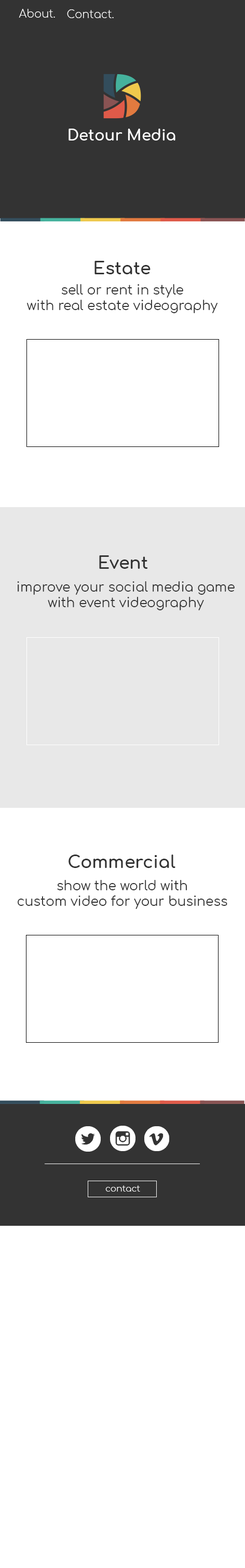
<style>
.page{position:relative;width:245px;height:1568px;background:#ffffff}
.page>*{position:absolute;margin:0}
.t1{font:10.8px "Comfortaa-Light";color:#ffffff}
.t2{font:15.1px "Comfortaa-Bold";color:#ffffff}
.t3{font:17.3px "Comfortaa-Bold";color:#333333}
.t4{font:13px "Comfortaa-Regular";color:#333333}
.t5{font:8.6px "Comfortaa-Light";color:#ffffff}
</style>
<div class="page">
<p class="t1" style="left:19px;top:9px;width:36px;height:9px">About.</p>
<p class="t1" style="left:67px;top:9px;width:47px;height:9px">Contact.</p>
<p class="t2" style="left:68px;top:129px;width:107px;height:12px">Detour Media</p>
<p class="t3" style="left:94px;top:261px;width:56px;height:13px">Estate</p>
<p class="t4" style="left:27px;top:284px;width:190px;height:29px;text-align:center">sell or rent in style<br>with real estate videography</p>
<p class="t3" style="left:99px;top:555px;width:49px;height:14px">Event</p>
<p class="t4" style="left:17px;top:581px;width:217px;height:29px;text-align:center">improve your social media game<br>with event videography</p>
<p class="t3" style="left:68px;top:855px;width:107px;height:13px">Commercial</p>
<p class="t4" style="left:18px;top:880px;width:209px;height:29px;text-align:center">show the world with<br>custom video for your business</p>
<p class="t5" style="left:105px;top:1185px;width:35px;height:7px">contact</p>
</div>
